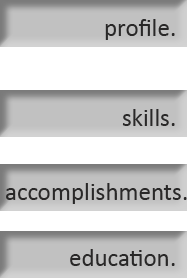
<style>
.page{position:relative;width:187px;height:278px;background:#ffffff}
.page>*{position:absolute;margin:0}
.t1{font:25px "Calibri";color:#292828}
</style>
<div class="page">
<p class="t1" style="left:105px;top:19px;width:70px;height:21px">profile.</p>
<p class="t1" style="left:122px;top:109px;width:53px;height:17px">skills.</p>
<p class="t1" style="left:6px;top:183px;width:181px;height:21px">accomplishments.</p>
<p class="t1" style="left:70px;top:249px;width:105px;height:17px">education.</p>
</div>
